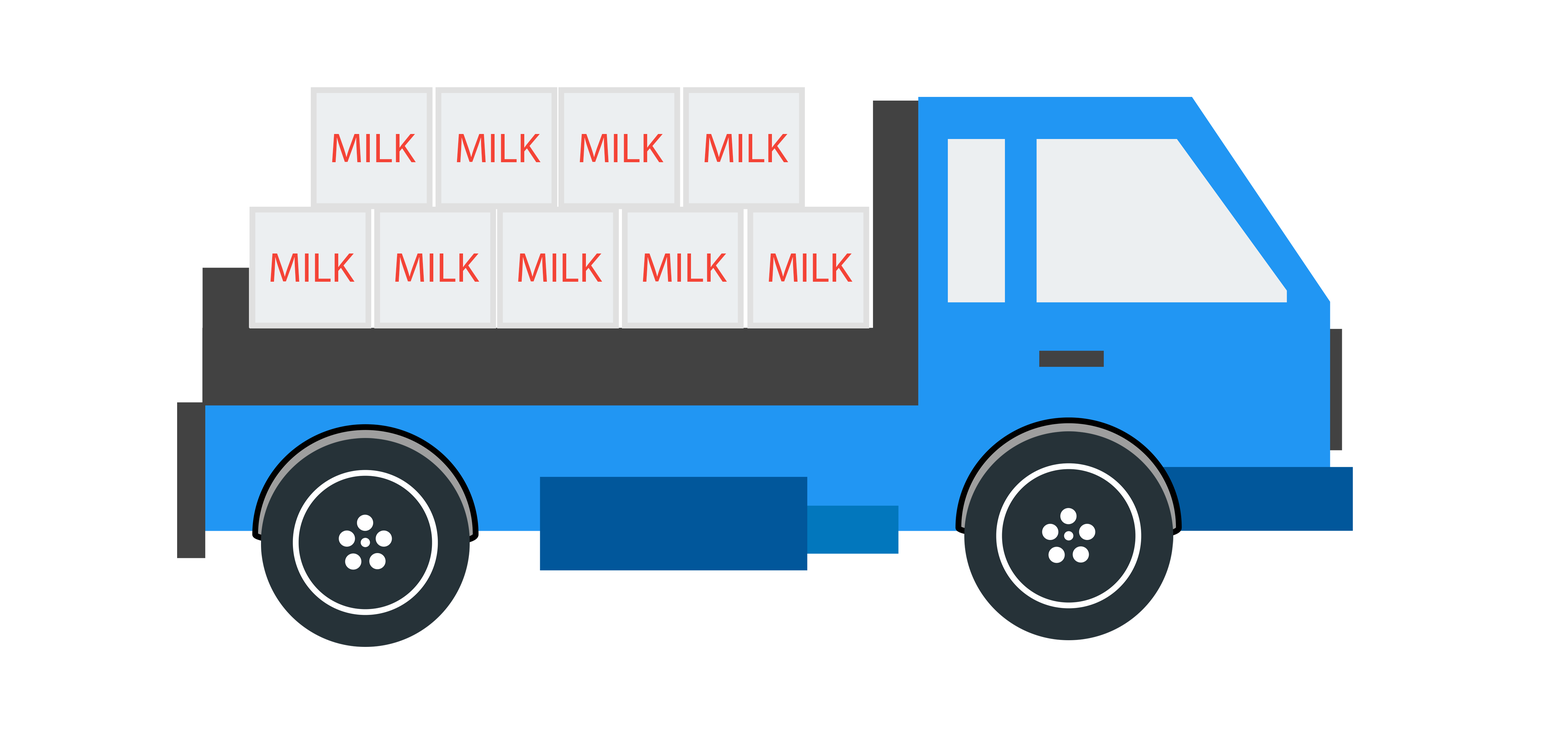
<style>
.page{position:relative;width:1568px;height:746px;background:#ffffff}
.page>*{position:absolute;margin:0}
.t1{font:41.8px "MyriadPro-Regular";color:#f44336}
</style>
<div class="page">
<p class="t1" style="left:332px;top:134px;width:84px;height:29px">MILK</p>
<p class="t1" style="left:457px;top:134px;width:84px;height:29px">MILK</p>
<p class="t1" style="left:580px;top:134px;width:84px;height:29px">MILK</p>
<p class="t1" style="left:704px;top:134px;width:84px;height:29px">MILK</p>
<p class="t1" style="left:270px;top:254px;width:85px;height:28px">MILK</p>
<p class="t1" style="left:395px;top:254px;width:84px;height:28px">MILK</p>
<p class="t1" style="left:518px;top:254px;width:84px;height:28px">MILK</p>
<p class="t1" style="left:643px;top:254px;width:84px;height:28px">MILK</p>
<p class="t1" style="left:769px;top:254px;width:84px;height:28px">MILK</p>
</div>
